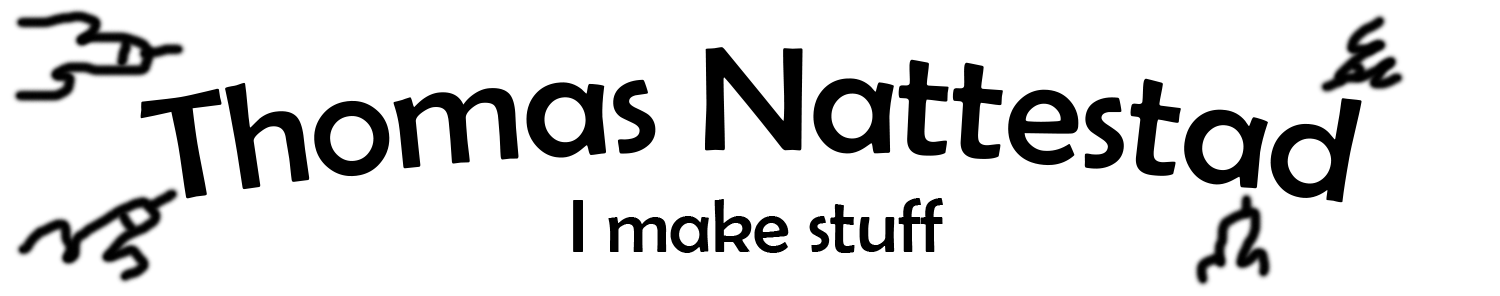
<style>
.page{position:relative;width:1500px;height:296px;background:#ffffff}
.page>*{position:absolute;margin:0}
.t1{font:149.5px "BerlinSansFB-Reg";color:#000000}
</style>
<div class="page">
<p class="t1" style="left:140px;top:47px;width:1222px;height:156px">Thomas Nattestad</p>
</div>
